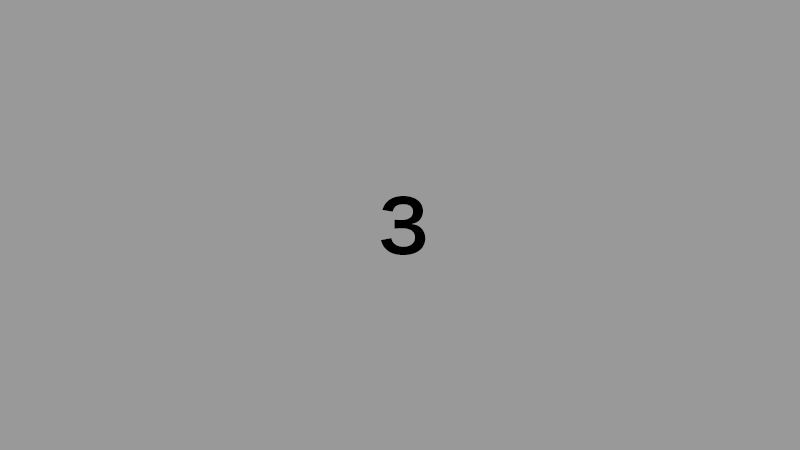
<style>
.page{position:relative;width:800px;height:450px;background:#999999}
.page>*{position:absolute;margin:0}
.t1{font:72px "HiraKakuProN-W6";color:#000000}
</style>
<div class="page">
<p class="t1" style="left:381px;top:196px;width:44px;height:59px">2</p>
<p class="t1" style="left:381px;top:196px;width:45px;height:59px">3</p>
</div>
